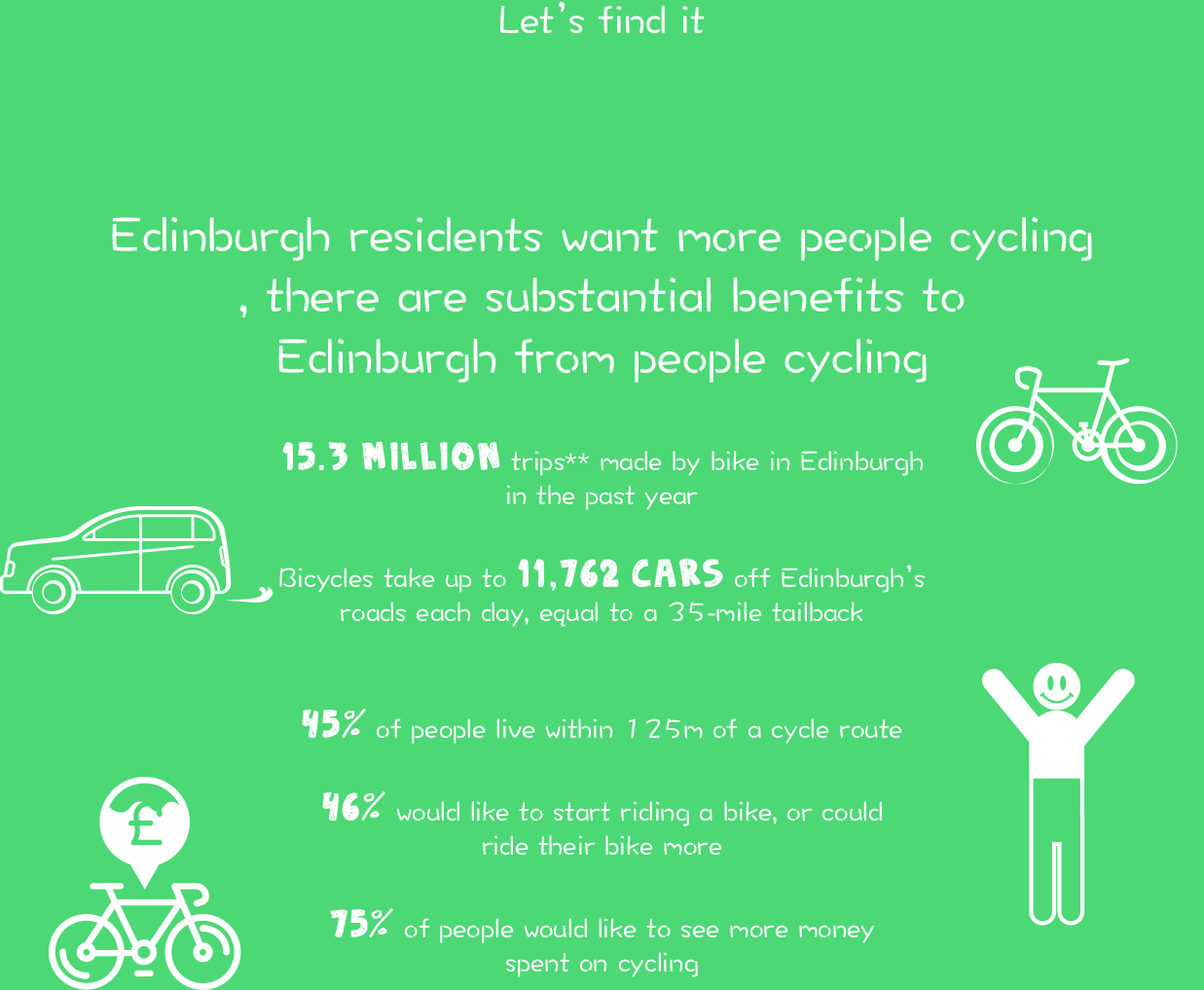
<style>
.page{position:relative;width:1204px;height:990px;background:#4cd875}
.page>*{position:absolute;margin:0}
.t1{font:40.6px "DFWaWaSC-W5";color:#ffffff}
.t2{font:50.7px "DFWaWaSC-W5";color:#ffffff}
.t3{font:40.6px "DENNE|Sketchy";color:#ffffff}
.t4{font:28.4px "DFWaWaSC-W5";color:#ffffff}
.t5{font:40.6px "Child's-Play";color:#ffffff}
</style>
<div class="page">
<p class="t1" style="left:500px;top:1px;width:205px;height:33px">Let’s find it</p>
<p class="t2" style="left:112px;top:217px;width:980px;height:760px;text-align:center">Edinburgh residents want more people cycling<br>, there are substantial benefits to<br>Edinburgh from people cycling<br><br><span class="t3">15.3 million </span><span class="t4">trips** made by bike in Edinburgh<br>in the past year<br><br>Bicycles take up to </span><span class="t3">11,762 cars</span><span class="t4"> off Edinburgh’s<br>roads each day, equal to a 35-mile tailback<br><br><br></span><span class="t3">45</span><span class="t5">%</span><span class="t4"> of people live within 125m of a cycle route<br><br></span><span class="t3">46</span><span class="t5">%</span><span class="t4"> would like to start riding a bike, or could<br>ride their bike more<br><br></span><span class="t3">75</span><span class="t5">%</span><span class="t4"> of people would like to see more money<br>spent on cycling<br><br><br></span><span class="t1">Bike ownership in Edinburgh<br><br><br><br><br>How often are people riding a bike</span></p>
</div>
